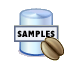
<style>
.page{position:relative;width:75px;height:66px;background:#ffffff}
.page>*{position:absolute;margin:0}
.t1{font:9px "Humanist521BT-XtraBoldCondensed";letter-spacing:0.05em;color:#000000;font-variant:small-caps}
</style>
<div class="page">
<p class="t1" style="left:17px;top:30px;width:38px;height:7px">SAMPLES</p>
</div>
